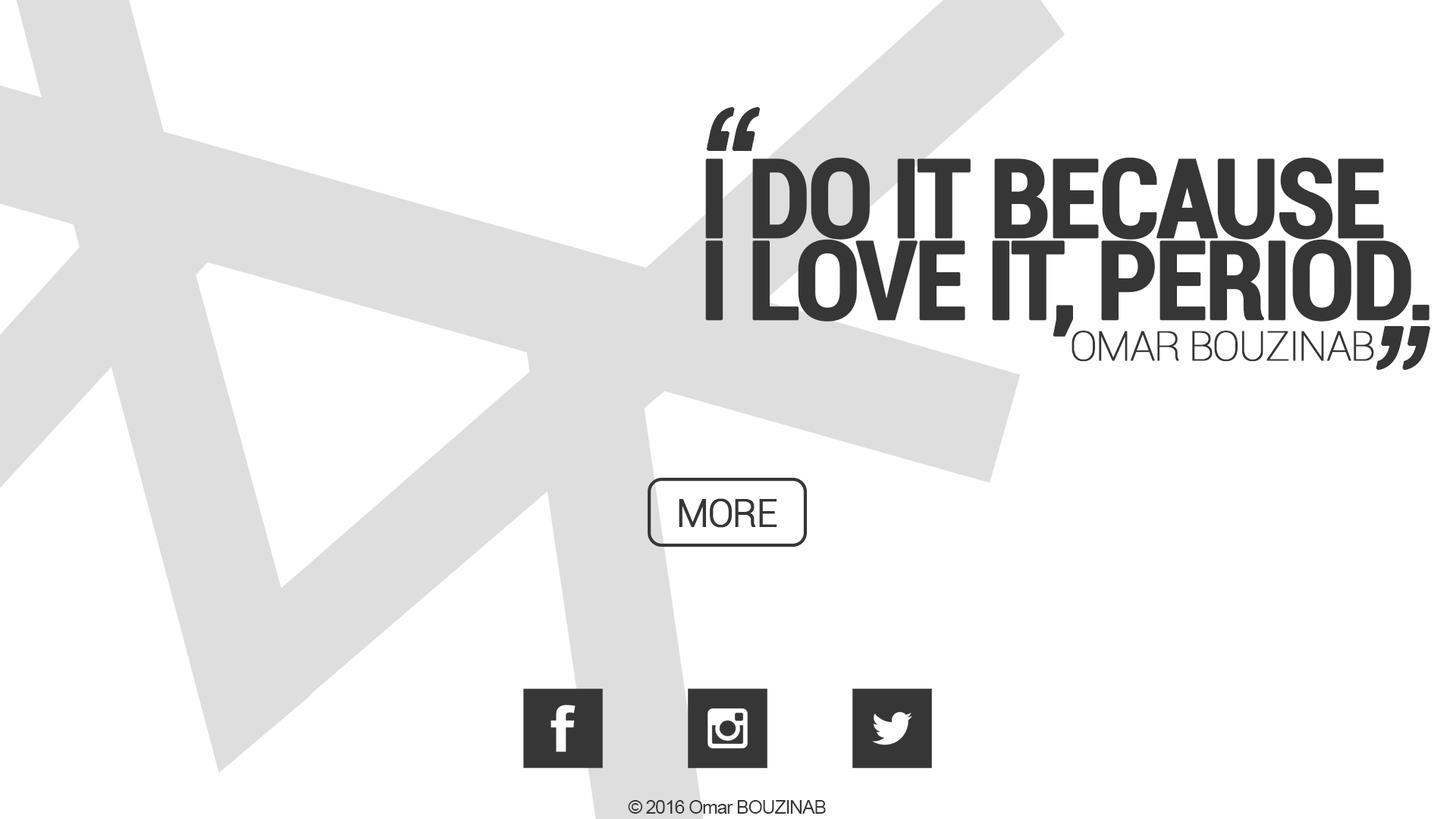
<style>
.page{position:relative;width:1456px;height:819px;background:#ffffff}
.page>*{position:absolute;margin:0}
.t1{font:163.6px "Arial-ItalicMT";letter-spacing:-0.05em;color:#363636;text-transform:uppercase;font-weight:bold}
.t2{font:109.1px/81.8px "Roboto-BoldCondensed";letter-spacing:-0.05em;color:#363636;text-transform:uppercase;font-weight:bold}
.t3{font:40.9px "Roboto-Thin";letter-spacing:-0.05em;color:#363636;text-transform:uppercase;font-weight:bold}
.t4{font:37.9px "Roboto-Light";letter-spacing:-0.05em;color:#363636;text-transform:uppercase;font-weight:bold}
.t5{font:19px "ArialMT";letter-spacing:-0.05em;color:#363636}
</style>
<div class="page">
<p class="t1" style="left:706px;top:106px;width:55px;height:46px">“</p>
<p class="t2" style="left:705px;top:157px;width:724px;height:180px">I do it because<br>I love it, period.</p>
<p class="t1" style="left:1376px;top:325px;width:55px;height:46px">”</p>
<p class="t3" style="left:1072px;top:331px;width:302px;height:31px">omar bouzinab</p>
<p class="t4" style="left:679px;top:498px;width:98px;height:30px">more</p>
<p class="t5" style="left:628px;top:800px;width:198px;height:14px">© 2016 Omar BOUZINAB</p>
</div>
